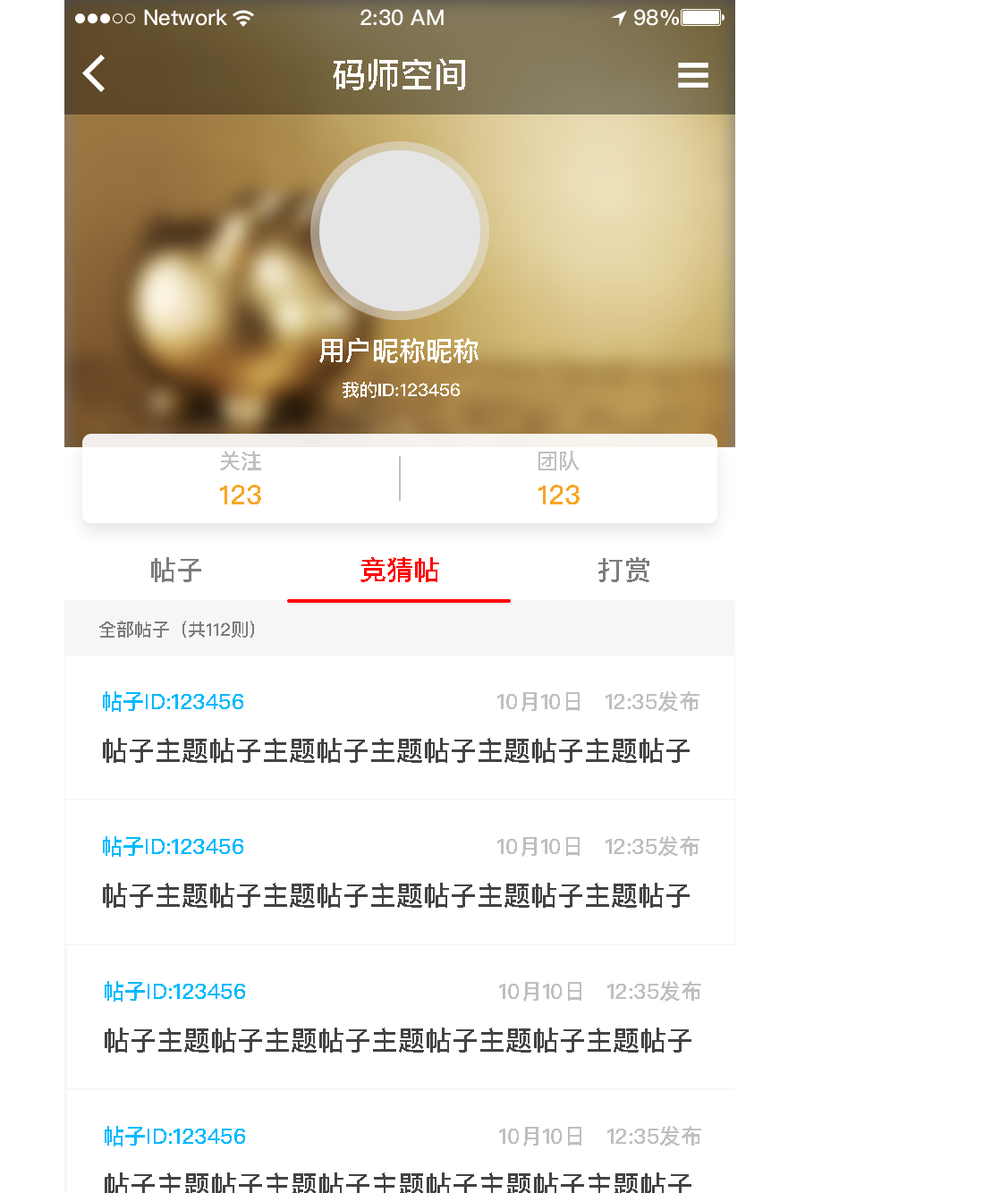
<style>
.page{position:relative;width:1000px;height:1193px;background:#ffffff}
.page>*{position:absolute;margin:0}
.t1{font:34px "PingFangSC-Medium";color:#ffffff;text-transform:uppercase}
.t2{font:26.8px "PingFangSC-Medium";color:#ffffff;text-transform:uppercase}
.t3{font:17.9px "PingFangSC-Medium";color:#ffffff;text-transform:uppercase}
.t4{font:21.5px "PingFangSC-Medium";color:#bfbfbf;text-transform:uppercase}
.t5{font:26.8px "PingFangSC-Medium";color:#f6a623;text-transform:uppercase}
.t6{font:26.8px "PingFangSC-Medium";color:#7d7d7d;text-transform:uppercase}
.t7{font:26.8px "PingFangSC-Medium";color:#ff0000;text-transform:uppercase}
.t8{font:17.9px "PingFangSC-Medium";color:#7d7d7d;text-transform:uppercase}
.t9{font:21.5px "PingFangSC-Medium";color:#01b9fd;text-transform:uppercase}
.t10{font:21.5px "PingFangSC-Medium";color:#01b9fd}
.t11{font:26.8px "PingFangSC-Medium";color:#434343;text-transform:uppercase}
</style>
<div class="page">
<p class="t1" style="left:333px;top:58px;width:132px;height:32px">码师空间</p>
<p class="t2" style="left:319px;top:338px;width:159px;height:25px">用户昵称昵称</p>
<p class="t3" style="left:342px;top:382px;width:118px;height:16px">我的id:123456</p>
<p class="t4" style="left:220px;top:451px;width:41px;height:19px">关注</p>
<p class="t4" style="left:538px;top:451px;width:41px;height:19px">团队</p>
<p class="t5" style="left:220px;top:485px;width:41px;height:19px">123</p>
<p class="t5" style="left:538px;top:485px;width:41px;height:19px">123</p>
<p class="t6" style="left:151px;top:557px;width:50px;height:25px">帖子</p>
<p class="t7" style="left:360px;top:557px;width:79px;height:25px">竞猜帖</p>
<p class="t6" style="left:598px;top:557px;width:51px;height:25px">打赏</p>
<p class="t8" style="left:99px;top:621px;width:155px;height:17px">全部帖子（共112则）</p>
<p class="t9" style="left:103px;top:691px;width:140px;height:21px">帖子<span class="t10">Ｉ</span>D:123456</p>
<p class="t4" style="left:497px;top:691px;width:202px;height:21px">10月10日   12:35发布</p>
<p class="t11" style="left:103px;top:738px;width:586px;height:25px">帖子主题帖子主题帖子主题帖子主题帖子主题帖子</p>
<p class="t9" style="left:103px;top:836px;width:140px;height:21px">帖子<span class="t10">Ｉ</span>D:123456</p>
<p class="t4" style="left:497px;top:836px;width:202px;height:21px">10月10日   12:35发布</p>
<p class="t11" style="left:103px;top:883px;width:586px;height:25px">帖子主题帖子主题帖子主题帖子主题帖子主题帖子</p>
<p class="t9" style="left:105px;top:981px;width:140px;height:20px">帖子<span class="t10">Ｉ</span>D:123456</p>
<p class="t4" style="left:499px;top:981px;width:202px;height:20px">10月10日   12:35发布</p>
<p class="t11" style="left:105px;top:1027px;width:586px;height:25px">帖子主题帖子主题帖子主题帖子主题帖子主题帖子</p>
<p class="t9" style="left:105px;top:1126px;width:140px;height:20px">帖子<span class="t10">Ｉ</span>D:123456</p>
<p class="t4" style="left:499px;top:1126px;width:202px;height:20px">10月10日   12:35发布</p>
</div>
